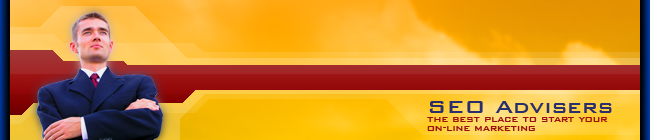
<style>
.page{position:relative;width:650px;height:140px}
.page>*{position:absolute;margin:0}
.t1{font:11px/9px "BankGothicBT-Medium";color:#9b1111}
.t2{font:24px "BankGothicBT-Medium";color:#282f6c}
</style>
<div class="page">
<p class="t1" style="left:427px;top:101px;width:185px;height:30px"><span class="t2">SEO Advisers<br></span>the best place to start your<br>on-line marketing</p>
</div>
